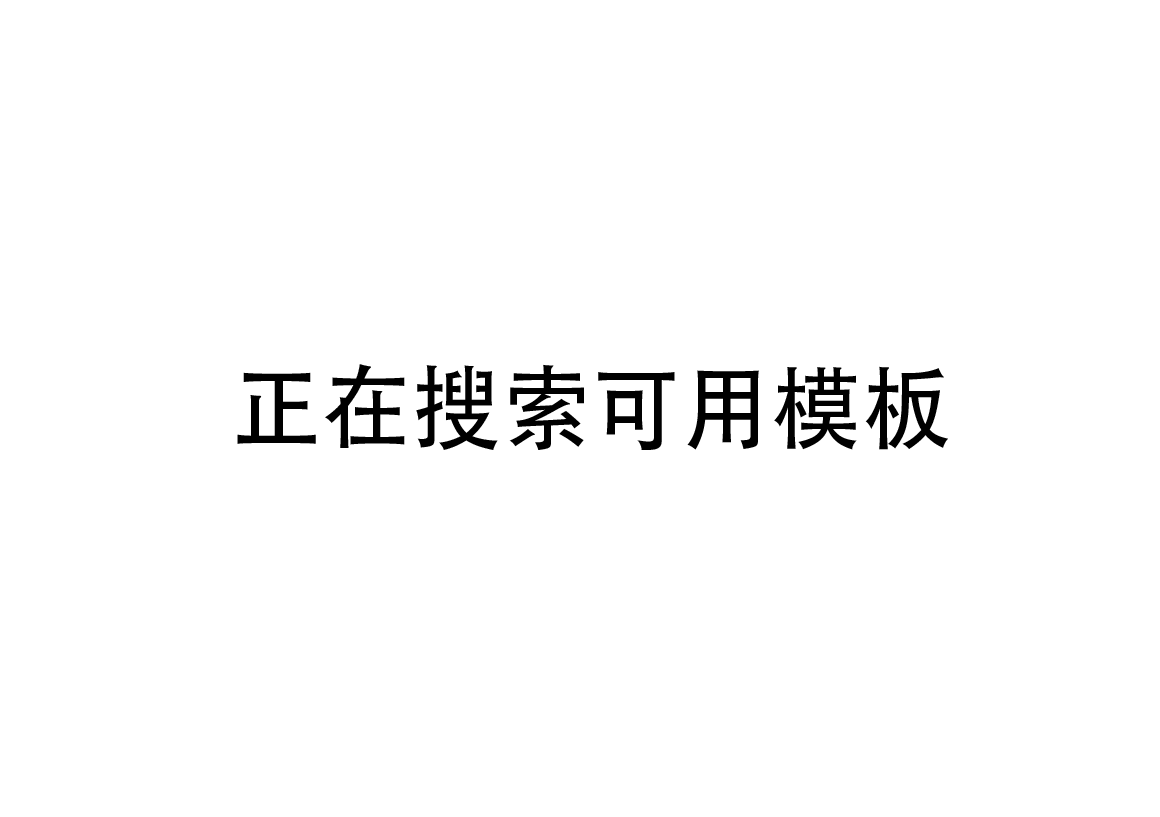
<style>
.page{position:relative;width:1160px;height:817px;background:#ffffff}
.page>*{position:absolute;margin:0}
.t1{font:92.7px "AdobeHeitiStd-Regular";color:#000000}
</style>
<div class="page">
<p class="t1" style="left:237px;top:364px;width:711px;height:86px">正在搜索可用模板</p>
</div>
